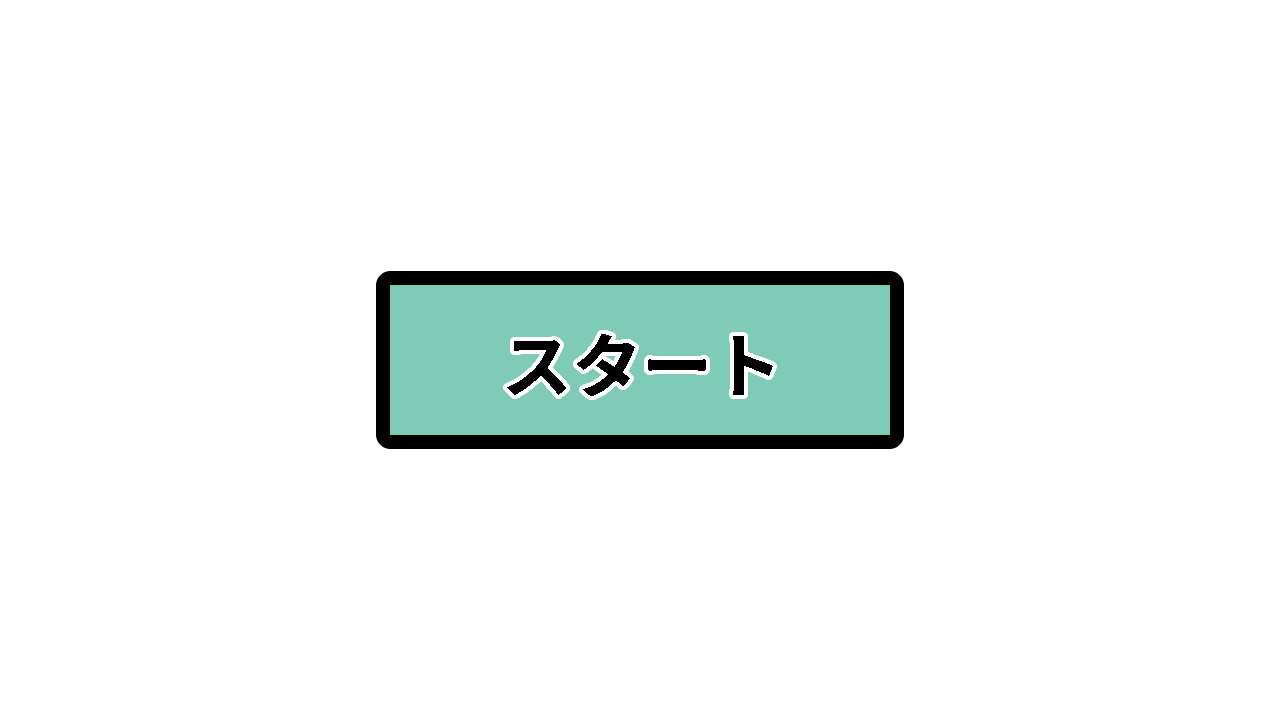
<style>
.page{position:relative;width:1280px;height:720px;background:#ffffff}
.page>*{position:absolute;margin:0}
.t1{font:70px "NotoSansJP-Bold";color:#000000}
</style>
<div class="page">
<p class="t1" style="left:507px;top:333px;width:266px;height:64px">スタート</p>
</div>
